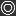
<style>
.page{position:relative;width:16px;height:16px;background:#333333}
.page>*{position:absolute;margin:0}
.t1{font:17.6px "RixJGoL";color:#ffffff}
</style>
<div class="page">
<p class="t1" style="left:0px;top:1px;width:15px;height:14px">◎</p>
</div>
